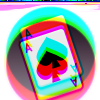
<style>
.page{position:relative;width:100px;height:100px}
.page>*{position:absolute;margin:0}
.t1{font:12.3px "CenturyGothic-Bold";scale:0.76 1}
</style>
<div class="page">
<p class="t1" style="left:25px;top:27px;width:8px;height:10px;rotate:-18deg">A</p>
</div>
